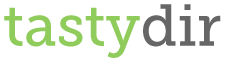
<style>
.page{position:relative;width:225px;height:62px;background:#ffffff}
.page>*{position:absolute;margin:0}
.t1{font:58.9px "MuseoSlab-500";color:#90cc5c}
.t2{font:58.9px "MuseoSlab-500";color:#666666}
</style>
<div class="page">
<p class="t1" style="left:4px;top:4px;width:217px;height:54px">tasty<span class="t2">dir</span></p>
</div>
